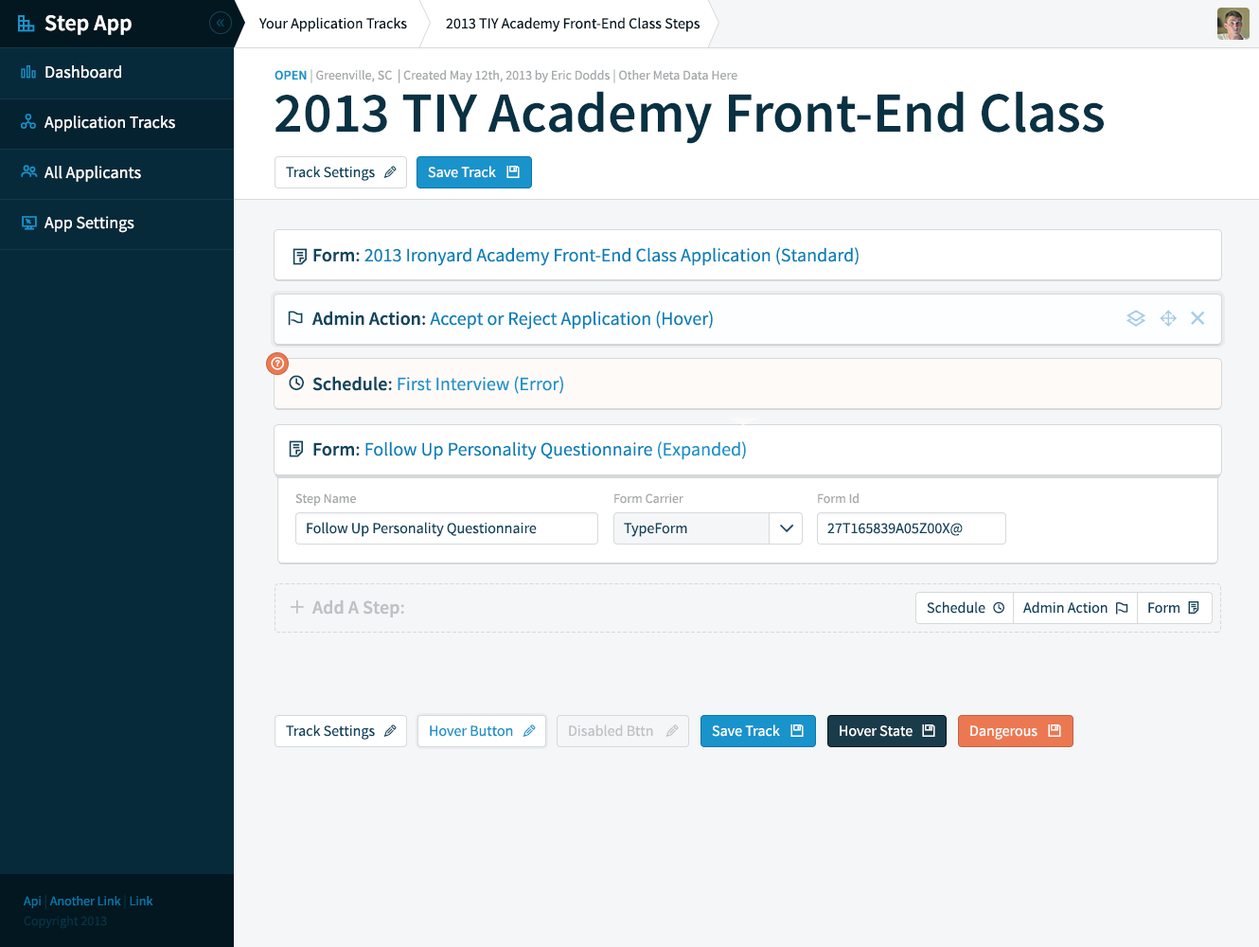
<style>
.page{position:relative;width:1259px;height:947px;background:#f5f6f7}
.page>*{position:absolute;margin:0}
.t1{font:20.8px "SSGizmo";color:#1993cb}
.t2{font:22.7px "SourceSansPro-Semibold";color:#ffffff}
.t3{font:15.1px "SourceSansPro-Regular";color:#031720}
.t4{font:20.8px "SourceSansPro-Regular";color:#0a4c6a}
.t5{font:17px/51.1px "SSGizmo";color:#1993cb}
.t6{font:15.1px/46.4px "SSGizmo";color:#1993cb}
.t7{font:15.1px/50.2px "SSGizmo";color:#1993cb}
.t8{font:17px/50.2px "SourceSansPro-Regular";color:#ffffff}
.t9{font:13.3px "SourceSansPro-Regular";color:#a6a9ab}
.t10{font:13.3px "SourceSansPro-Semibold";color:#1993cb}
.t11{font:56.8px "SourceSansPro-Semibold";color:#083143}
.t12{font:15.1px "SourceSansPro-Regular";color:#0e455e}
.t13{font:14.2px "SSGizmo";color:#0e455e}
.t14{font:15.1px "SourceSansPro-Regular";color:#ffffff}
.t15{font:15.1px "SSGizmo";color:#ffffff}
.t16{font:18.9px "SSGizmo";color:#0e455e}
.t17{font:18.9px "SourceSansPro-Regular";color:#0380ba}
.t18{font:18.9px "SourceSansPro-Semibold";color:#0e455e}
.t19{font:17px "SSGizmo";color:#0e455e}
.t20{font:18.9px "SSGizmo";color:#a5cde6}
.t21{font:24.6px "SSGizmo";color:#a5cde6}
.t22{font:16.1px "SSGizmo";color:#ffffff}
.t23{font:18.9px "SourceSansPro-Regular";color:#1993cb}
.t24{font:18.9px "SSGizmo";color:#bec2c4}
.t25{font:18.9px "SourceSansPro-Semibold";color:#bec2c4}
.t26{font:15.1px "SourceSansPro-Regular";color:#1993cb}
.t27{font:14.2px "SSGizmo";color:#1993cb}
.t28{font:15.1px "SourceSansPro-Regular";color:#bec2c4}
.t29{font:14.2px "SSGizmo";color:#bec2c4}
.t30{font:13.3px/19.9px "SourceSansPro-Regular";color:#083143}
.t31{font:13.3px/19.9px "SourceSansPro-Regular";color:#0876a8}
</style>
<div class="page">
<p class="t1" style="left:18px;top:15px;width:17px;height:17px">pixels</p>
<p class="t2" style="left:45px;top:15px;width:87px;height:20px">Step App</p>
<p class="t3" style="left:258px;top:17px;width:149px;height:15px">Your Application Tracks</p>
<p class="t3" style="left:446px;top:17px;width:255px;height:15px">2013 TIY Academy Front-End Class Steps</p>
<p class="t4" style="left:217px;top:19px;width:7px;height:8px">«</p>
<p class="t5" style="left:21px;top:65px;width:17px;height:165px"><span class="t6">barchart<br></span><span class="t7">share<br></span>users<br>desktop</p>
<p class="t8" style="left:45px;top:65px;width:130px;height:168px">Dashboard<br>Application Tracks<br>All Applicants<br>App Settings</p>
<p class="t9" style="left:275px;top:69px;width:463px;height:14px"><span class="t10">OPEN </span>| Greenville, SC  | Created May 12th, 2013 by Eric Dodds | Other Meta Data Here</p>
<p class="t11" style="left:276px;top:91px;width:828px;height:53px">2013 TIY Academy Front-End Class</p>
<p class="t12" style="left:286px;top:166px;width:89px;height:15px">Track Settings</p>
<p class="t13" style="left:383px;top:166px;width:14px;height:13px">edit</p>
<p class="t14" style="left:428px;top:166px;width:68px;height:12px">Save Track</p>
<p class="t15" style="left:507px;top:166px;width:13px;height:12px">save</p>
<p class="t16" style="left:293px;top:248px;width:14px;height:17px">File</p>
<p class="t17" style="left:313px;top:247px;width:546px;height:19px"><span class="t18">Form: </span>2013 Ironyard Academy Front-End Class Application (Standard)</p>
<p class="t19" style="left:288px;top:311px;width:15px;height:15px">flag</p>
<p class="t17" style="left:312px;top:311px;width:401px;height:19px"><span class="t18">Admin Action: </span>Accept or Reject Application (Hover)</p>
<p class="t20" style="left:1127px;top:310px;width:19px;height:17px">layers</p>
<p class="t20" style="left:1160px;top:310px;width:17px;height:17px">Move</p>
<p class="t21" style="left:1191px;top:311px;width:14px;height:14px">delete</p>
<p class="t22" style="left:271px;top:357px;width:13px;height:13px">help</p>
<p class="t16" style="left:289px;top:375px;width:15px;height:15px">clock</p>
<p class="t23" style="left:312px;top:376px;width:251px;height:18px"><span class="t18">Schedule:</span> First Interview (Error)</p>
<p class="t16" style="left:289px;top:440px;width:14px;height:17px">File</p>
<p class="t17" style="left:313px;top:441px;width:433px;height:19px"><span class="t18">Form: </span>Follow Up Personality Questionnaire <span class="t23">(Expanded)</span></p>
<p class="t9" style="left:295px;top:493px;width:61px;height:13px">Step Name</p>
<p class="t9" style="left:615px;top:493px;width:69px;height:11px">Form Carrier</p>
<p class="t9" style="left:818px;top:493px;width:41px;height:11px">Form Id</p>
<p class="t12" style="left:307px;top:522px;width:230px;height:15px">Follow Up Personality Questionnaire</p>
<p class="t12" style="left:624px;top:523px;width:63px;height:14px">TypeForm</p>
<p class="t16" style="left:780px;top:524px;width:14px;height:9px">navigatedown</p>
<p class="t12" style="left:828px;top:523px;width:135px;height:13px">27T165839A05Z00X@</p>
<p class="t24" style="left:291px;top:600px;width:13px;height:14px">plus</p>
<p class="t25" style="left:312px;top:599px;width:92px;height:18px">Add A Step:</p>
<p class="t12" style="left:927px;top:601px;width:59px;height:13px">Schedule</p>
<p class="t13" style="left:993px;top:601px;width:12px;height:13px">clock</p>
<p class="t12" style="left:1024px;top:601px;width:84px;height:13px">Admin Action</p>
<p class="t13" style="left:1116px;top:602px;width:13px;height:13px">flag</p>
<p class="t12" style="left:1149px;top:602px;width:31px;height:12px">Form</p>
<p class="t13" style="left:1188px;top:601px;width:12px;height:13px">File</p>
<p class="t12" style="left:286px;top:724px;width:89px;height:16px">Track Settings</p>
<p class="t13" style="left:383px;top:724px;width:14px;height:14px">edit</p>
<p class="t26" style="left:430px;top:725px;width:83px;height:12px">Hover Button</p>
<p class="t27" style="left:523px;top:724px;width:13px;height:14px">edit</p>
<p class="t28" style="left:569px;top:724px;width:84px;height:13px">Disabled Bttn</p>
<p class="t29" style="left:666px;top:724px;width:13px;height:14px">edit</p>
<p class="t14" style="left:712px;top:724px;width:68px;height:13px">Save Track</p>
<p class="t15" style="left:791px;top:724px;width:13px;height:13px">save</p>
<p class="t14" style="left:840px;top:725px;width:73px;height:12px">Hover State</p>
<p class="t15" style="left:922px;top:724px;width:14px;height:13px">save</p>
<p class="t14" style="left:971px;top:725px;width:67px;height:15px">Dangerous</p>
<p class="t15" style="left:1048px;top:724px;width:13px;height:13px">save</p>
<p class="t30" style="left:24px;top:895px;width:129px;height:34px"><span class="t31">Api</span> |<span class="t31"> Another Link </span>| <span class="t31">Link<br></span>Copyright 2013</p>
</div>
